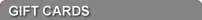
<style>
.page{position:relative;width:202px;height:20px;background:#858585}
.page>*{position:absolute;margin:0}
.t1{font:13.3px "Arial-BoldMT";color:#ffffff}
</style>
<div class="page">
<p class="t1" style="left:9px;top:5px;width:80px;height:11px">GIFT CARDS</p>
</div>
